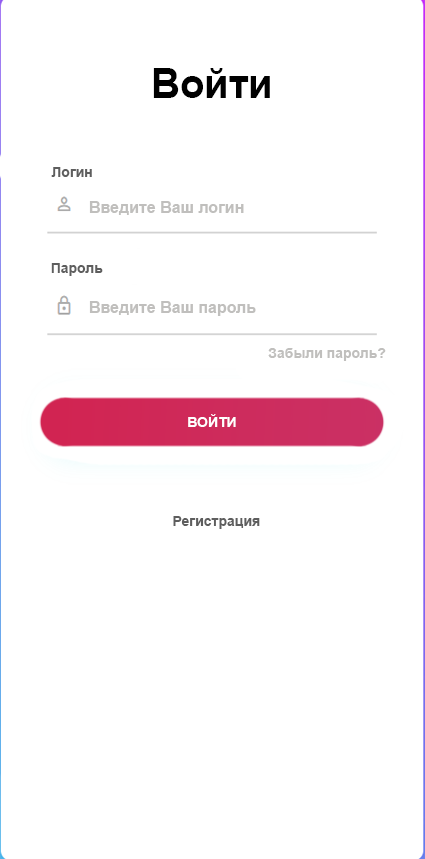
<style>
.page{position:relative;width:425px;height:859px;background:#ffffff}
.page>*{position:absolute;margin:0}
.t1{font:40.9px "Arial-BoldMT";color:#000000}
.t2{font:14px "Arial-BoldMT";color:#5e5e5e}
.t3{font:16px "Arial-BoldMT";color:#c0bfbd}
.t4{font:14px "Arial-BoldMT";color:#c0bfbd}
.t5{font:14px "Arial-BoldMT";color:#ffffff}
</style>
<div class="page">
<p class="t1" style="left:153px;top:68px;width:117px;height:30px">Войти</p>
<p class="t2" style="left:51px;top:167px;width:41px;height:10px">Логин</p>
<p class="t3" style="left:89px;top:201px;width:155px;height:14px">Введите Ваш логин</p>
<p class="t2" style="left:51px;top:263px;width:52px;height:13px">Пароль</p>
<p class="t3" style="left:89px;top:301px;width:167px;height:15px">Введите Ваш пароль</p>
<p class="t4" style="left:268px;top:348px;width:118px;height:13px">Забыли пароль?</p>
<p class="t5" style="left:188px;top:414px;width:48px;height:13px">ВОЙТИ</p>
<p class="t2" style="left:173px;top:516px;width:87px;height:13px">Регистрация</p>
</div>
